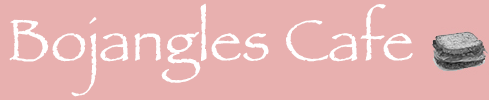
<style>
.page{position:relative;width:489px;height:100px;background:#e8b0af}
.page>*{position:absolute;margin:0}
.t1{font:60px "Papyrus";color:#ffffff}
</style>
<div class="page">
<p class="t1" style="left:9px;top:3px;width:404px;height:94px">Bojangles Cafe</p>
</div>
